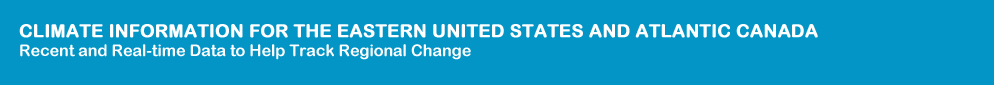
<style>
.page{position:relative;width:994px;height:85px;background:#0395c5}
.page>*{position:absolute;margin:0}
.t1{font:18px "ArialRoundedMTBold";color:#ffffff;font-weight:bold}
.t2{font:16px "ArialRoundedMTBold";color:#ffffff}
</style>
<div class="page">
<p class="t1" style="left:19px;top:24px;width:799px;height:36px">CLIMATE INFORMATION FOR THE EASTERN UNITED STATES AND ATLANTIC CANADA<br><span class="t2">Recent and Real-time Data to Help Track Regional Change</span></p>
</div>
